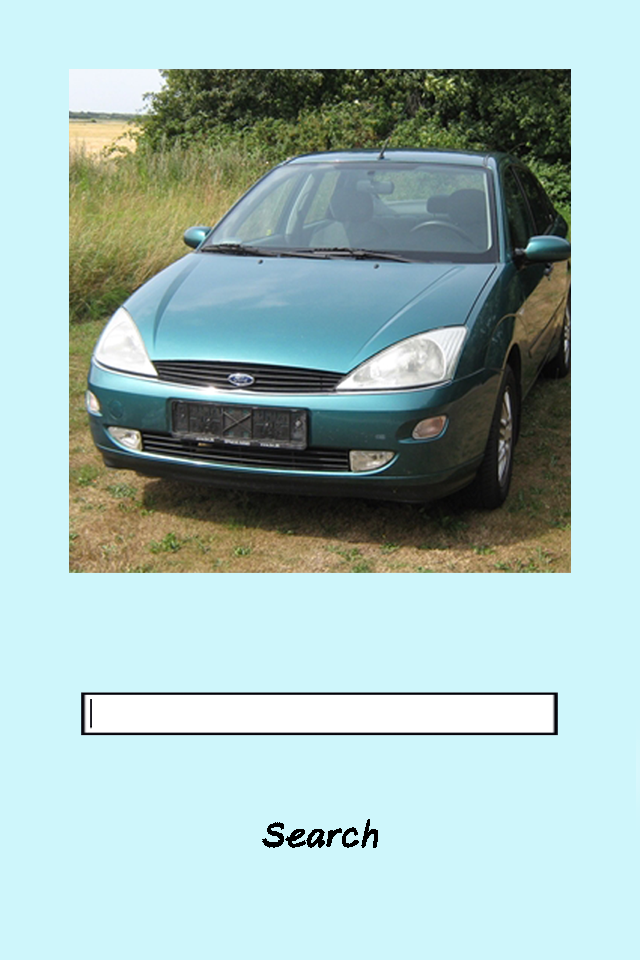
<style>
.page{position:relative;width:640px;height:960px;background:#cef6fb}
.page>*{position:absolute;margin:0}
.t1{font:36px "AxureHandwriting-BoldItalic";color:#000000}
</style>
<div class="page">
<p class="t1" style="left:262px;top:819px;width:116px;height:29px">Search</p>
</div>
